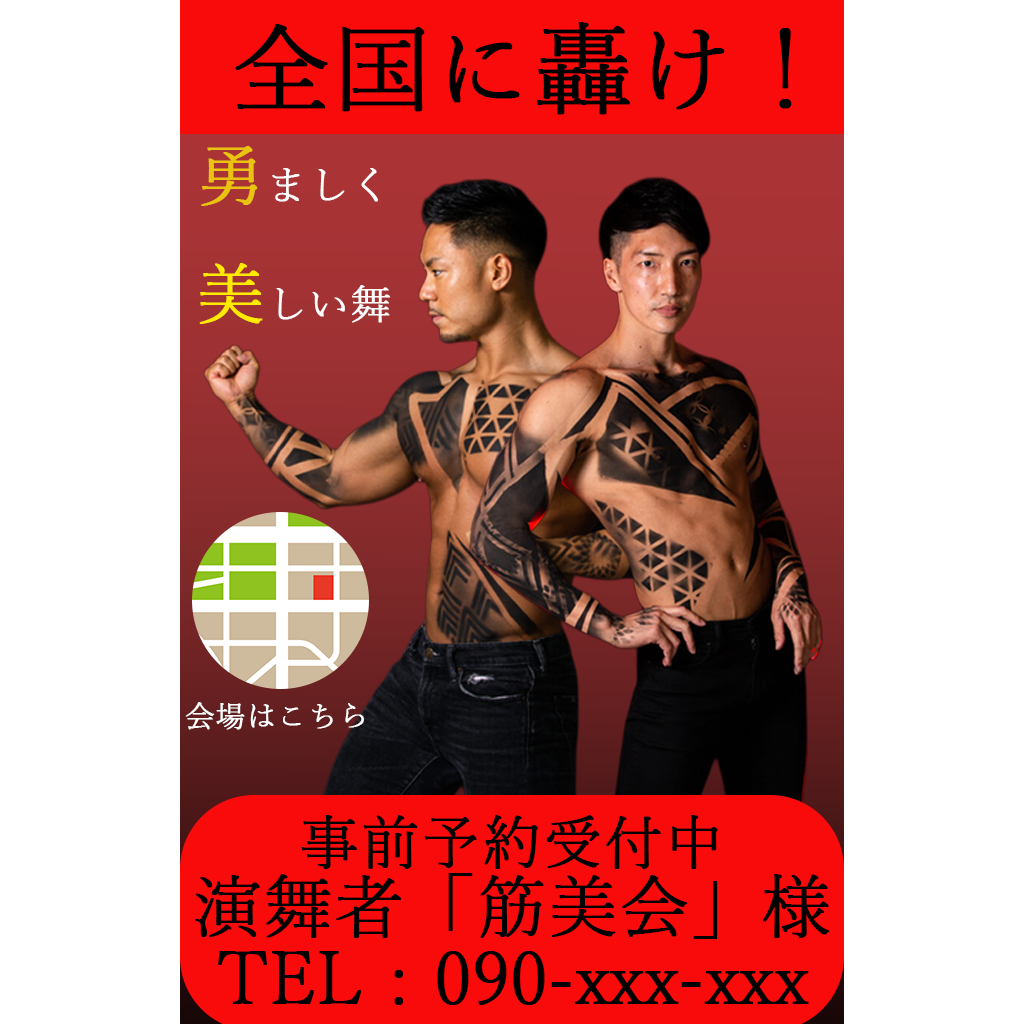
<style>
.page{position:relative;width:1024px;height:1024px;background:#ffffff}
.page>*{position:absolute;margin:0}
.t1{font:98.3px "YuMincho-Light";color:#000000;font-weight:bold}
.t2{font:40.8px "YuMincho-Light";color:#ffffff;font-weight:bold}
.t3{font:67.9px "YuMincho-Light";color:#e9c30f;font-weight:bold}
.t4{font:67.9px "YuMincho-Light";color:#ffea00;font-weight:bold}
.t5{font:30px "YuMincho-Light";color:#ffffff;font-weight:bold}
.t6{font:59.3px "YuMincho-Light";color:#000000;font-weight:bold}
.t7{font:69.2px "YuMincho-Light";color:#000000;font-weight:bold}
.t8{font:72px "YuMincho-Light";color:#000000;font-weight:bold}
</style>
<div class="page">
<p class="t1" style="left:235px;top:22px;width:557px;height:93px">全国に轟け！</p>
<p class="t2" style="left:199px;top:146px;width:191px;height:178px"><span class="t3">勇</span>ましく<br><span class="t4">美</span>しい舞</p>
<p class="t5" style="left:185px;top:702px;width:179px;height:28px">会場はこちら</p>
<p class="t6" style="left:301px;top:815px;width:417px;height:54px">事前予約受付中</p>
<p class="t7" style="left:195px;top:873px;width:635px;height:66px">演舞者「筋美会」様</p>
<p class="t8" style="left:218px;top:951px;width:591px;height:54px">TEL : 090-xxx-xxx</p>
</div>
